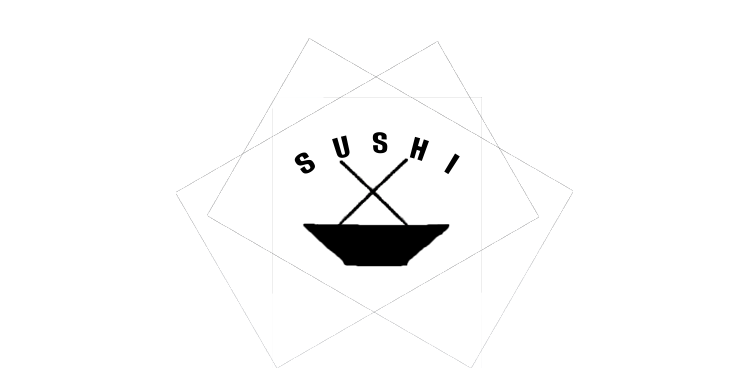
<style>
.page{position:relative;width:731px;height:368px;background:#ffffff}
.page>*{position:absolute;margin:0}
.t1{font:26px "Impact";color:#000000}
</style>
<div class="page">
<p class="t1" style="left:294px;top:132px;width:166px;height:43px">S    U    S    H    I</p>
</div>
